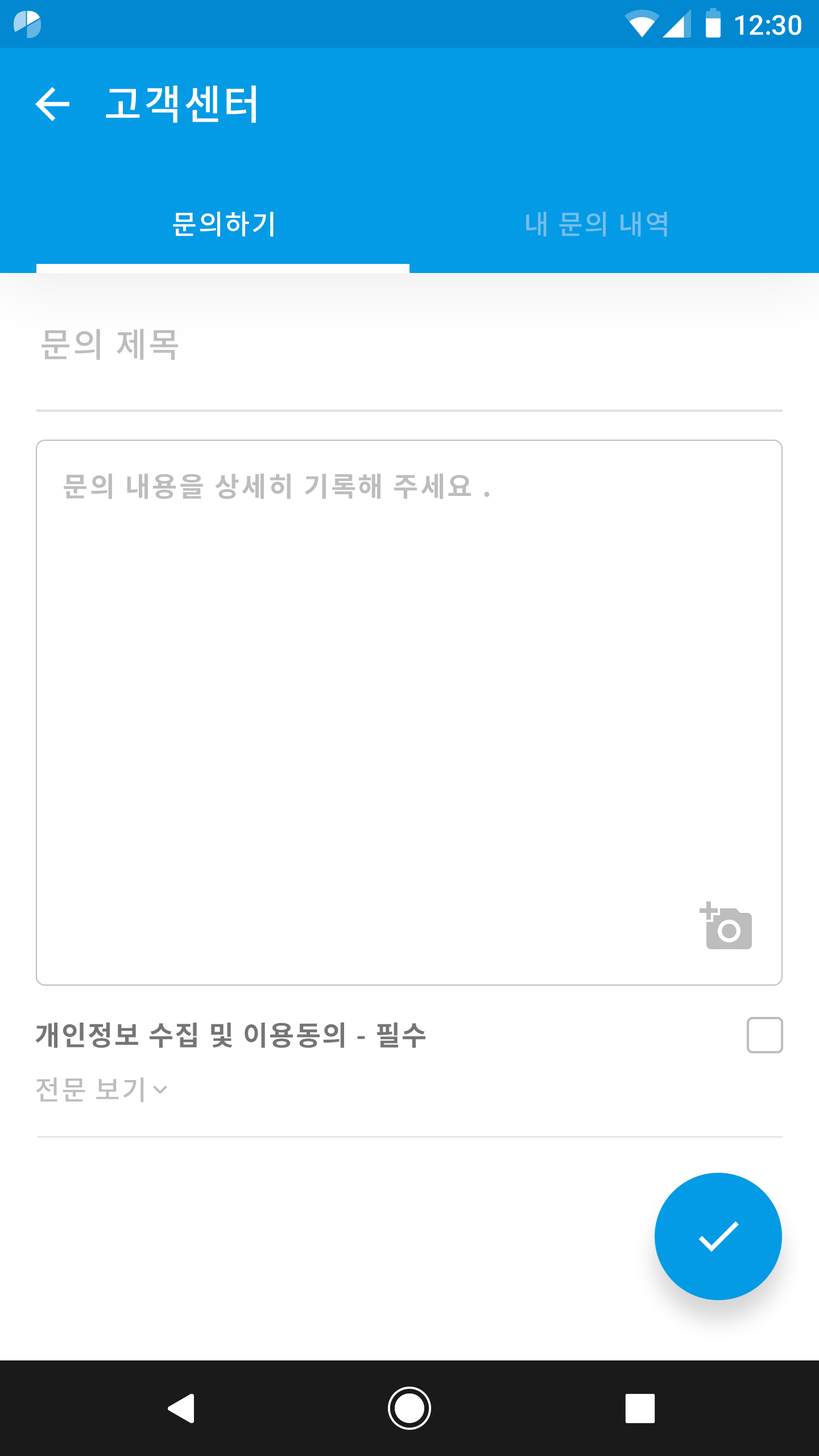
<style>
.page{position:relative;width:819px;height:1456px;background:#ffffff}
.page>*{position:absolute;margin:0}
.t1{font:27.3px "Roboto-Medium";color:#ffffff}
.t2{font:40.9px "NotoSansCJKkr-Medium";letter-spacing:0.05em;color:#ffffff}
.t3{font:27.3px "NotoSansCJKkr-Medium";letter-spacing:0.05em;color:#ffffff}
.t4{font:27.3px "NotoSansCJKkr-Medium";letter-spacing:0.05em;color:#76bded}
.t5{font:34.1px "NotoSansCJKkr-Medium";letter-spacing:0.05em;color:#bdbdbd}
.t6{font:27.3px "NotoSansCJKkr-Bold";letter-spacing:0.072em;color:#bdbdbd}
.t7{font:27.3px "NotoSansCJKkr-Bold";letter-spacing:0.05em;color:#757575}
.t8{font:27.3px "NotoSansCJKkr-Medium";letter-spacing:0.05em;color:#bdbdbd}
</style>
<div class="page">
<p class="t1" style="left:735px;top:15px;width:66px;height:20px">12:30</p>
<p class="t2" style="left:106px;top:85px;width:150px;height:38px">고객센터</p>
<p class="t3" style="left:173px;top:212px;width:101px;height:25px">문의하기</p>
<p class="t4" style="left:526px;top:212px;width:141px;height:25px">내 문의 내역</p>
<p class="t5" style="left:42px;top:329px;width:136px;height:31px">문의 제목</p>
<p class="t6" style="left:64px;top:473px;width:426px;height:26px">문의 내용을 상세히 기록해 주세요 .</p>
<p class="t7" style="left:35px;top:1022px;width:390px;height:26px">개인정보 수집 및 이용동의 - 필수</p>
<p class="t8" style="left:36px;top:1077px;width:108px;height:25px">전문 보기</p>
</div>
